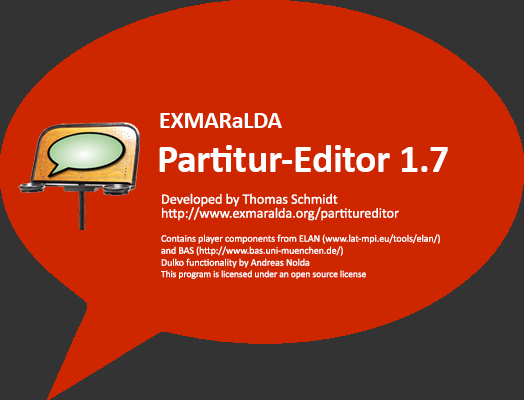
<style>
.page{position:relative;width:524px;height:400px;background:#ce2700}
.page>*{position:absolute;margin:0}
.t1{font:23.8px "Calibri-Bold";letter-spacing:-0.005em;color:#ffffff}
.t2{font:39.6px "Calibri-Bold";letter-spacing:-0.005em;color:#ffffff}
.t3{font:10px "Calibri";letter-spacing:-0.005em;color:#ffffff}
.t4{font:14.3px/14px "Calibri";letter-spacing:-0.005em;color:#ffffff}
.t5{font:9.5px "Calibri";letter-spacing:-0.005em;color:#ffffff}
</style>
<div class="page">
<p class="t1" style="left:160px;top:113px;width:122px;height:15px">EXMARaLDA</p>
<p class="t2" style="left:159px;top:145px;width:289px;height:27px">Partitur-Editor 1.7</p>
<p class="t3" style="left:161px;top:193px;width:279px;height:86px"><span class="t4">Developed by Thomas Schmidt<br>http://www.exmaralda.org/partitureditor<br></span><br>Contains player components from ELAN (www.lat-mpi.eu/tools/elan/)<br>and BAS (http://www.bas.uni-muenchen.de/)<br>Dulko functionality by Andreas Nolda<br><span class="t5">This program is licensed under an open source license</span></p>
</div>
